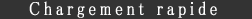
<style>
.page{position:relative;width:252px;height:19px;background:#333333}
.page>*{position:absolute;margin:0}
.t1{font:19px "MS-PMincho";letter-spacing:0.22em;color:#ffffff;font-weight:bold;scale:0.84 1}
</style>
<div class="page">
<p class="t1" style="left:29px;top:1px;width:188px;height:17px">Chargement rapide</p>
</div>
